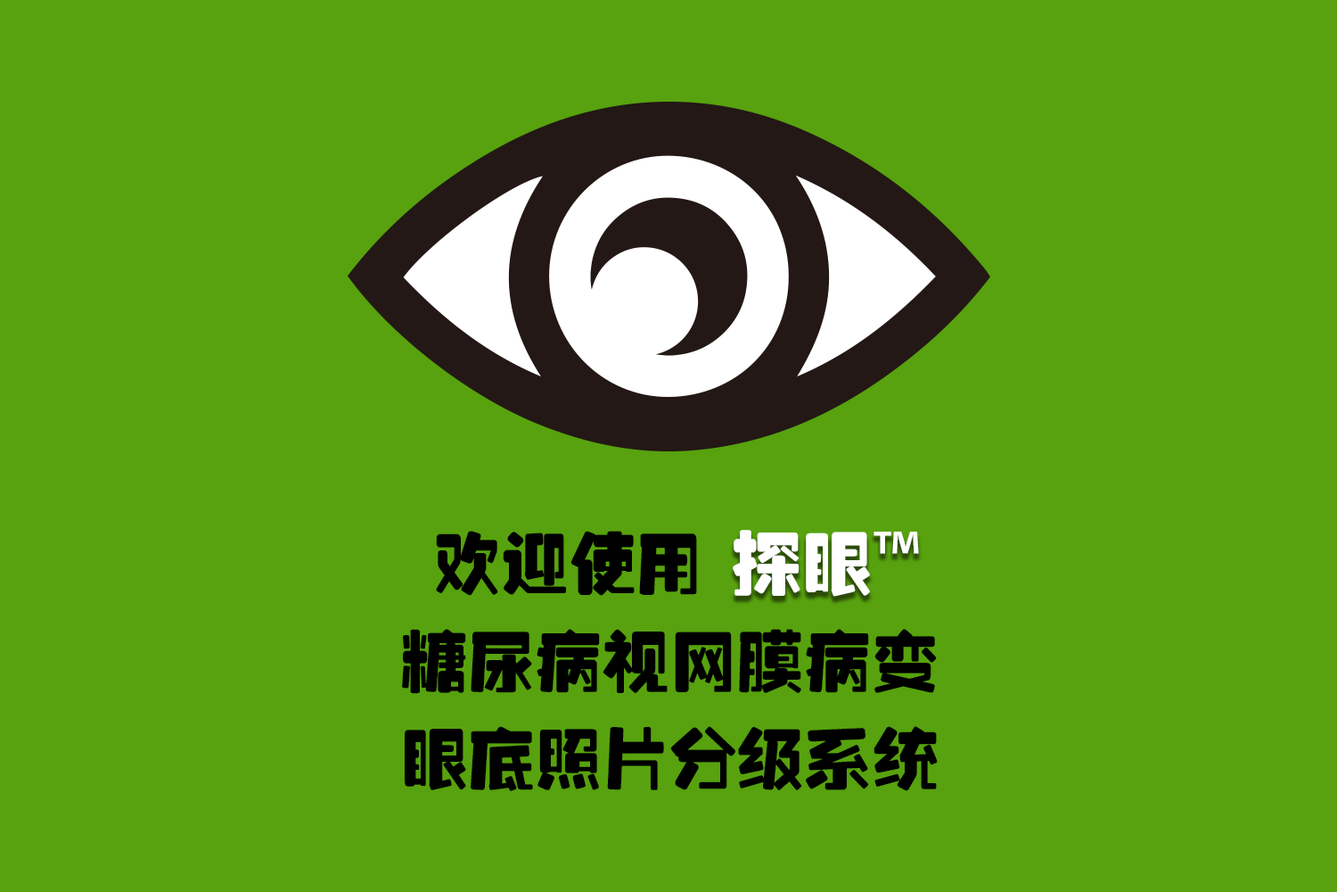
<style>
.page{position:relative;width:1337px;height:892px;background:#57a20e}
.page>*{position:absolute;margin:0}
.t1{font:67.4px "Tensentype-JinZhuanHeiJ";color:#010000}
.t2{font:70.2px "Tensentype-JinZhuanHeiJ";color:#ffffff}
.t3{font:70.2px "AdobeHeitiStd-Regular";color:#ffffff}
</style>
<div class="page">
<p class="t1" style="left:402px;top:531px;width:536px;height:260px;text-align:center">欢迎使用      <br>糖尿病视网膜病变<br>眼底照片分级系统</p>
<p class="t2" style="left:733px;top:530px;width:186px;height:66px">探眼<span class="t3">™</span></p>
</div>
